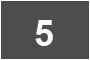
<style>
.page{position:relative;width:90px;height:60px;background:#4d4d4d}
.page>*{position:absolute;margin:0}
.t1{font:36px "Arial-BoldMT";color:#fafafa}
</style>
<div class="page">
<p class="t1" style="left:35px;top:20px;width:18px;height:26px">5</p>
</div>
